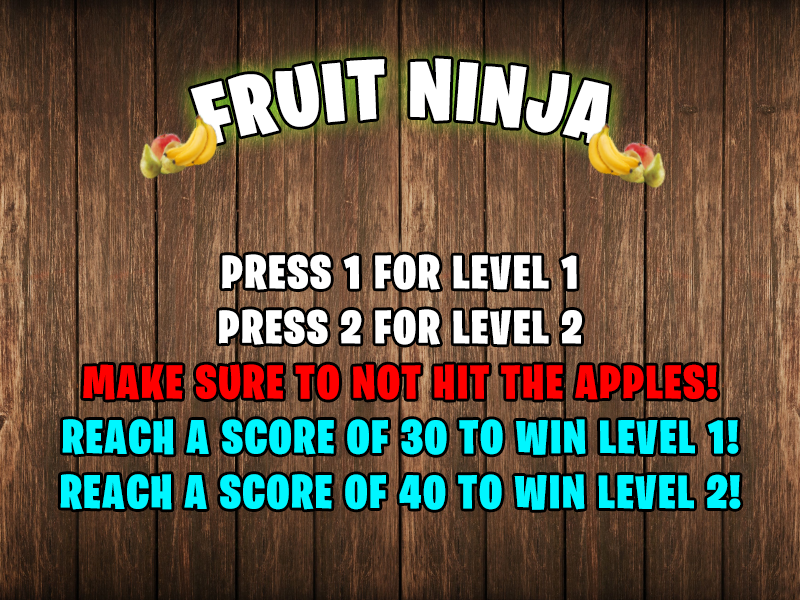
<style>
.page{position:relative;width:800px;height:600px}
.page>*{position:absolute;margin:0}
.t1{font:84px "BurbankBigCondensed-Black";letter-spacing:0.04em;color:#ffffff}
.t2{font:47.5px/54.9px "BurbankBigCondensed-Black";letter-spacing:0.04em;color:#00f6ff}
.t3{font:47.5px/21.5px "BurbankBigCondensed-Black";letter-spacing:0.04em;color:#ffffff}
.t4{font:47.5px/54.9px "BurbankBigCondensed-Black";letter-spacing:0.04em;color:#ffffff}
.t5{font:47.5px/54.9px "BurbankBigCondensed-Black";letter-spacing:0.04em;color:#ff0000}
</style>
<div class="page">
<p class="t1" style="left:190px;top:58px;width:419px;height:89px">FRUIT NINJA</p>
<p class="t2" style="left:60px;top:254px;width:681px;height:256px;text-align:center"><span class="t3">PRESS 1 FOR LEVEL 1</span><span class="t4"><br>PRESS 2 FOR LEVEL 2<br></span><span class="t5">MAKE SURE TO NOT HIT THE APPLES!<br></span>REACH A SCORE OF 30 TO WIN LEVEL 1!<br>REACH A SCORE OF 40 TO WIN LEVEL 2!</p>
</div>
